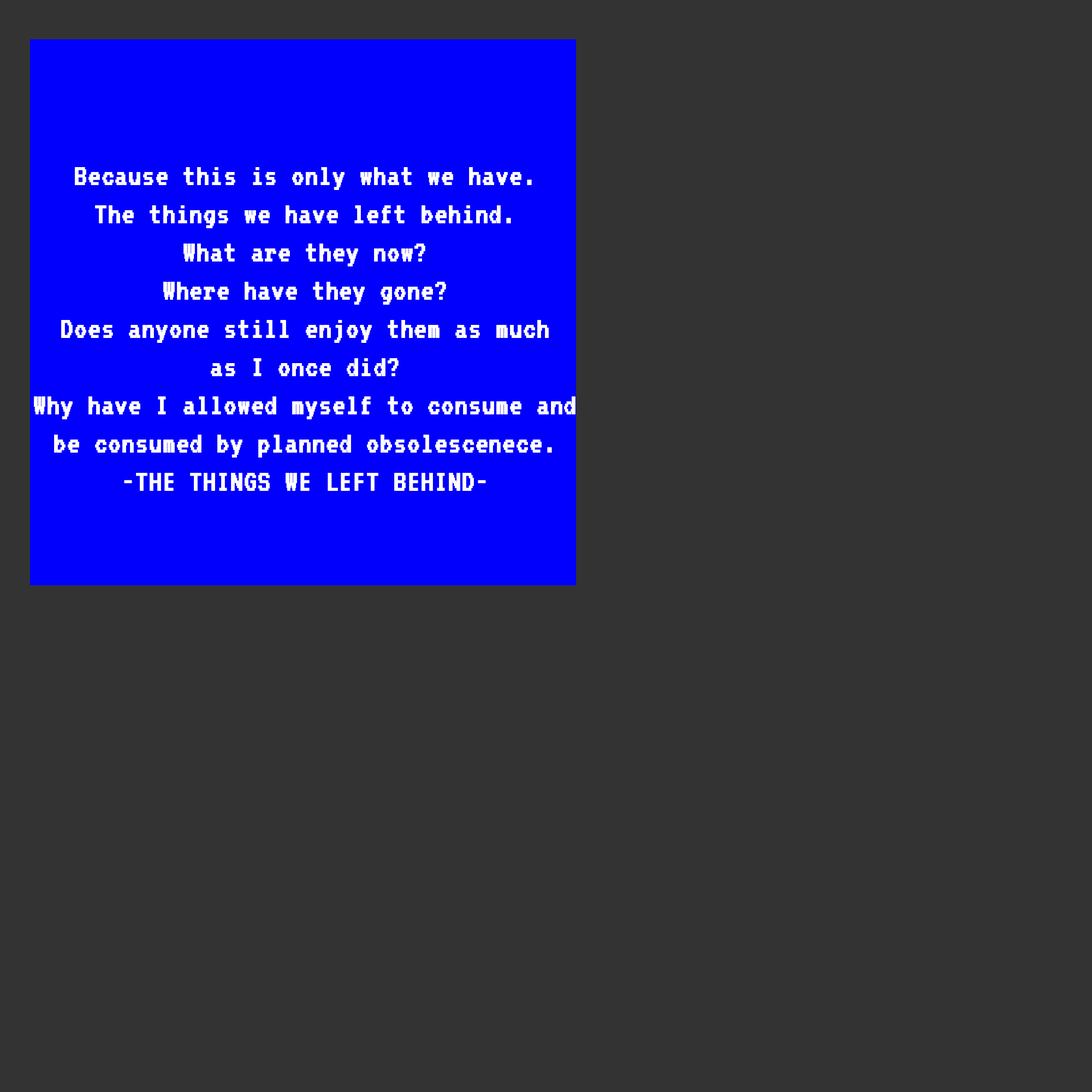
<style>
.page{position:relative;width:1092px;height:1092px;background:#333333}
.page>*{position:absolute;margin:0}
.t1{font:31.8px "VT323-Regular";color:#ffffff;font-weight:bold}
</style>
<div class="page">
<p class="t1" style="left:34px;top:167px;width:541px;height:324px;text-align:center">Because this is only what we have. <br>The things we have left behind. <br>What are they now?<br>Where have they gone?<br>Does anyone still enjoy them as much<br>as I once did?<br>Why have I allowed myself to consume and<br>be consumed by planned obsolescenece.<br>-THE THINGS WE LEFT BEHIND-</p>
</div>
